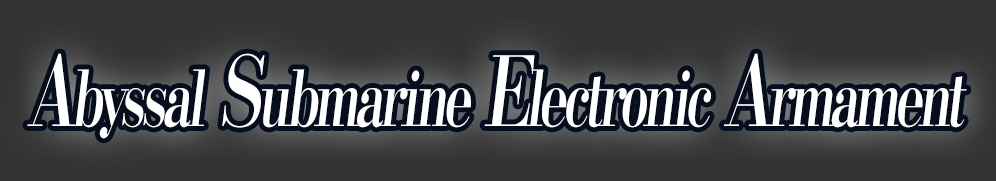
<style>
.page{position:relative;width:996px;height:181px;background:#333333}
.page>*{position:absolute;margin:0}
.t1{font:76.8px "KochoStd-Heavy";letter-spacing:-0.08em;color:#ffffff;font-style:italic;scale:0.68 1}
.t2{font:96px "KochoStd-Heavy";letter-spacing:-0.08em;color:#ffffff;font-style:italic;scale:0.68 1}
</style>
<div class="page">
<p class="t1" style="left:27px;top:53px;width:940px;height:86px"><span class="t2">A</span>byssal<span class="t2"> S</span>ubmarine<span class="t2"> E</span>lectronic<span class="t2"> A</span>rmament</p>
</div>
